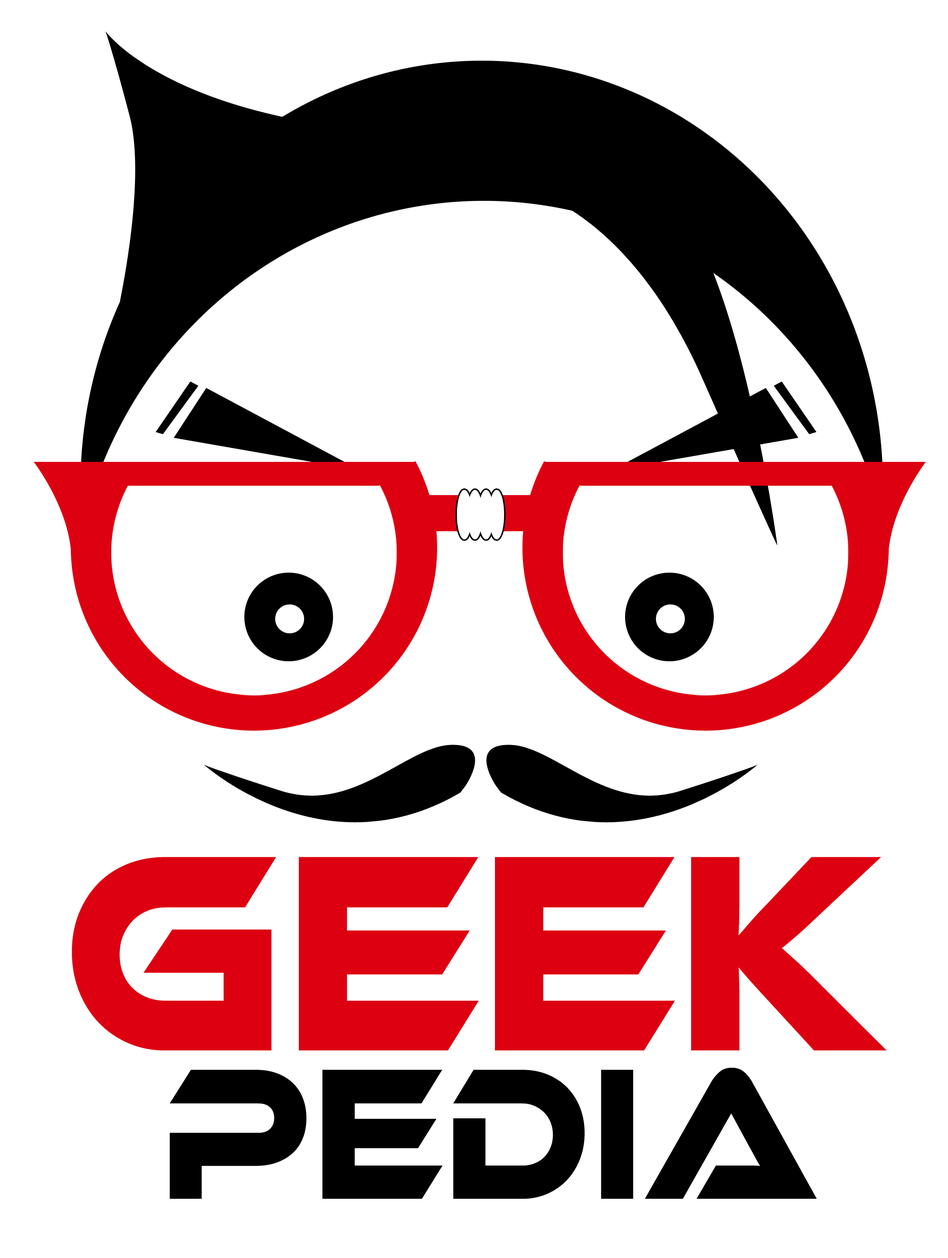
<style>
.page{position:relative;width:948px;height:1258px;background:#ffffff}
.page>*{position:absolute;margin:0}
.t1{font:289.1px "EthnocentricRg-Regular";color:#dd0011;text-transform:uppercase;scale:0.8 1}
.t2{font:192.7px "EthnocentricRg-Regular";color:#000000;text-transform:uppercase;scale:0.8 1}
</style>
<div class="page">
<p class="t1" style="left:72px;top:857px;width:814px;height:194px">GEEK</p>
<p class="t2" style="left:170px;top:1068px;width:647px;height:131px">PEDIA</p>
</div>
